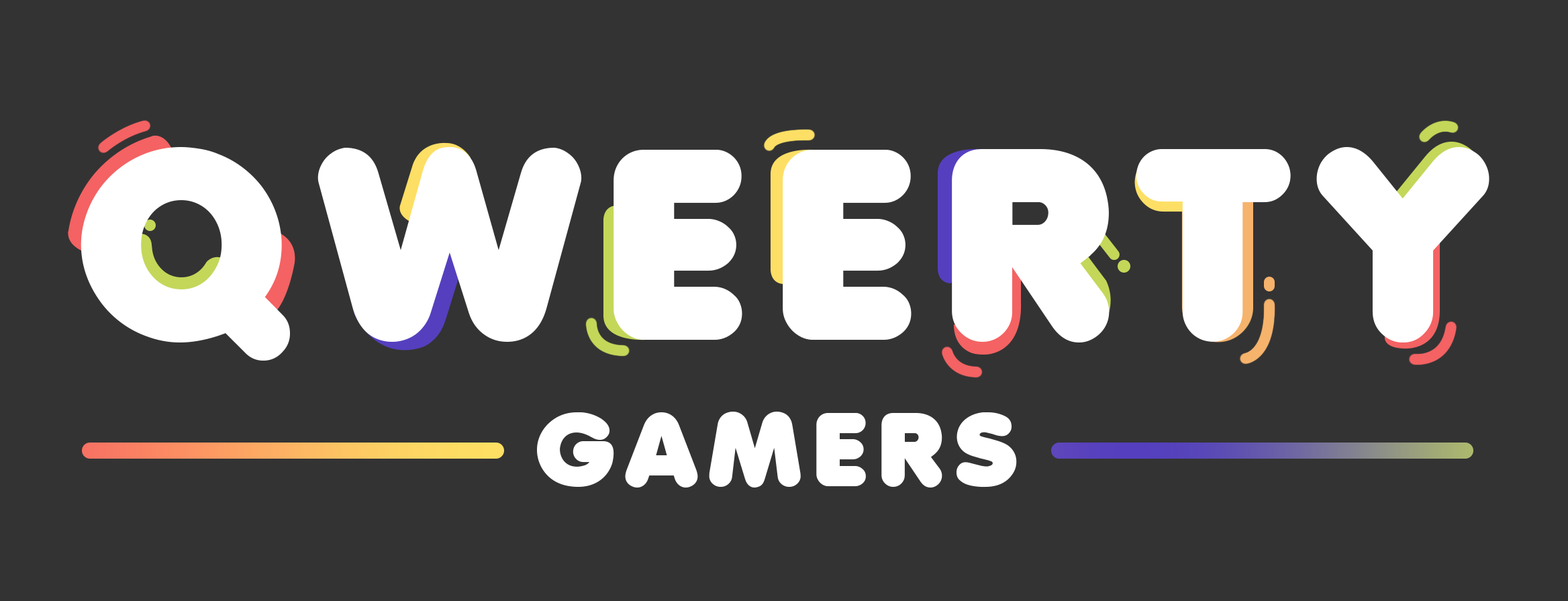
<style>
.page{position:relative;width:1568px;height:601px;background:#333333}
.page>*{position:absolute;margin:0}
.t1{font:261.8px "AnjaElianeaccent-Nornal";letter-spacing:0.115em;color:#ffffff;text-transform:uppercase}
.t2{font:100.9px "AnjaElianeaccent-Nornal";letter-spacing:0.115em;color:#ffffff;text-transform:uppercase}
</style>
<div class="page">
<p class="t1" style="left:81px;top:147px;width:501px;height:213px">QW</p>
<p class="t1" style="left:614px;top:150px;width:298px;height:190px">EE</p>
<p class="t1" style="left:952px;top:147px;width:537px;height:195px">RTY</p>
<p class="t2" style="left:537px;top:411px;width:480px;height:76px">gamers</p>
</div>
